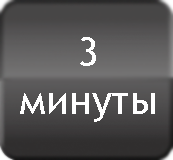
<style>
.page{position:relative;width:173px;height:160px}
.page>*{position:absolute;margin:0}
.t1{font:40px "TrebuchetMS";color:#ffffff}
</style>
<div class="page">
<p class="t1" style="left:20px;top:37px;width:135px;height:85px;text-align:center">3 <br>минуты</p>
</div>
